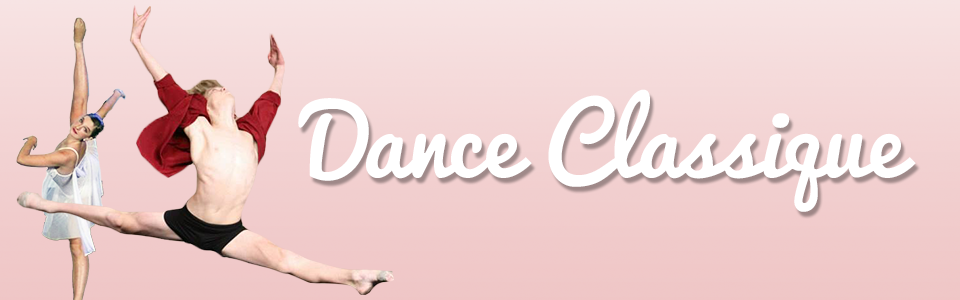
<style>
.page{position:relative;width:960px;height:300px}
.page>*{position:absolute;margin:0}
.t1{font:94.4px "Pacifico-Regular";color:#ffffff}
</style>
<div class="page">
<p class="t1" style="left:298px;top:89px;width:618px;height:123px">Dance Classique</p>
</div>
